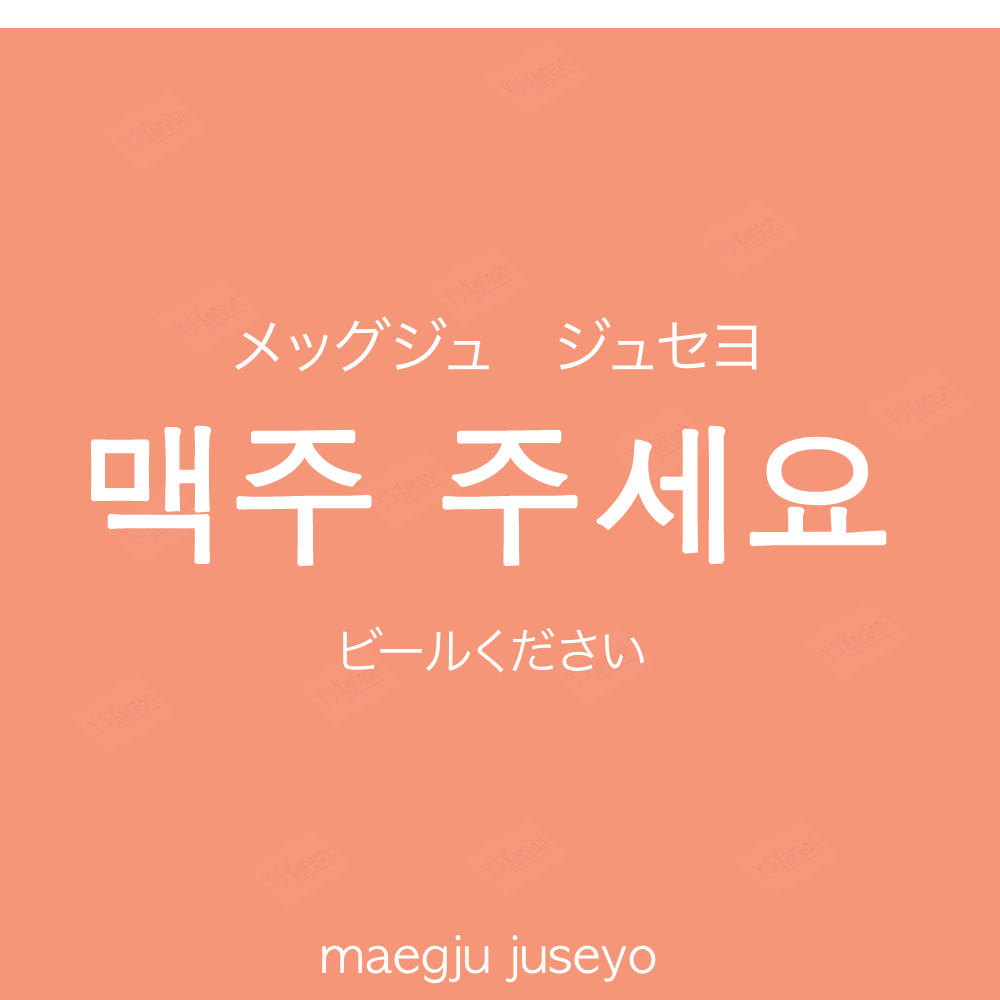
<style>
.page{position:relative;width:1000px;height:1000px;background:#f69679}
.page>*{position:absolute;margin:0}
.t1{font:60px "HiraKakuProN-W3";color:#ffffff;text-transform:uppercase}
.t2{font:150px "AppleGothic";color:#ffffff;font-weight:bold}
.t3{font:50px "HiraKakuProN-W3";color:#ffffff}
.t4{font:50px "AppleGothic";color:#ffffff}
</style>
<div class="page">
<p class="t1" style="left:235px;top:316px;width:522px;height:56px">メッグジュ　ジュセヨ</p>
<p class="t2" style="left:90px;top:425px;width:797px;height:142px">맥주 주세요</p>
<p class="t3" style="left:343px;top:626px;width:301px;height:47px">ビールください</p>
<p class="t4" style="left:322px;top:935px;width:334px;height:49px">maegju juseyo</p>
</div>
